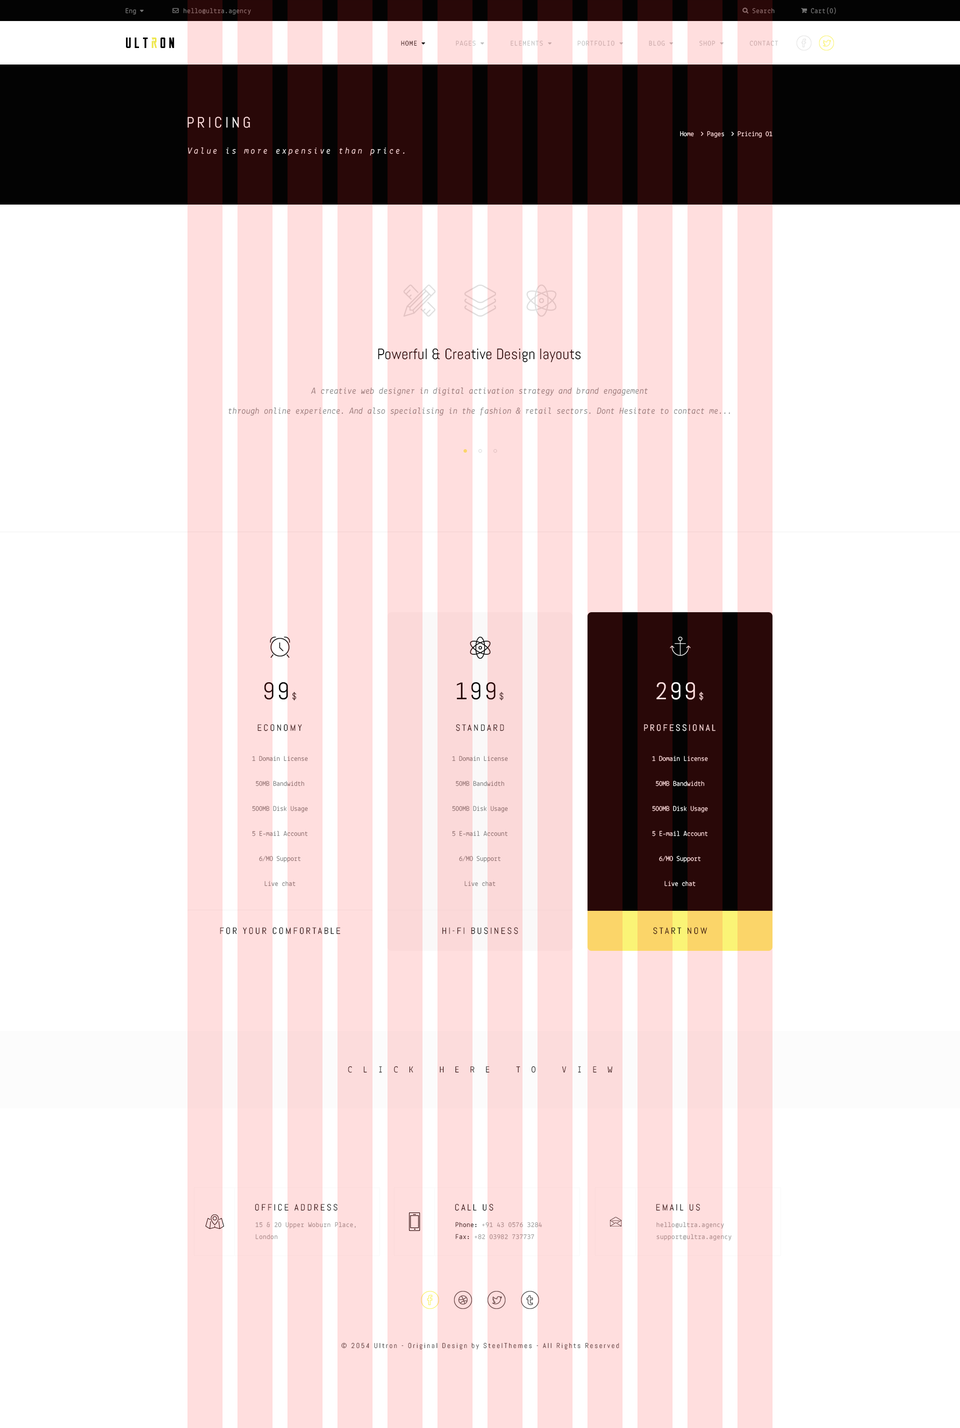
<style>
.page{position:relative;width:960px;height:1428px;background:#ffffff}
.page>*{position:absolute;margin:0}
.t1{font:7px "Lekton-Regular";letter-spacing:0.04em;color:#787878}
.t2{font:7px "Lekton-Regular";letter-spacing:0.1em;color:#bfbfbf;text-transform:uppercase}
.t3{font:7px "Lekton-Regular";letter-spacing:0.1em;color:#030303;text-transform:uppercase}
.t4{font:15px "Abel-Regular";letter-spacing:0.2em;color:#ffdede;text-transform:uppercase}
.t5{font:9px "Lekton-Italic";letter-spacing:0.2em;color:#ffdede}
.t6{font:15px "Abel-Regular"}
.t7{font:9px/20px "Lekton-Italic";color:#8c6b6b}
.t8{font:24px "Abel-Regular";letter-spacing:0.1em}
.t9{font:9px "Abel-Regular";letter-spacing:0.1em}
.t10{font:9px "Abel-Regular";letter-spacing:0.2em;text-transform:uppercase}
.t11{font:9px "Abel-Regular";letter-spacing:0.2em;color:#290808;text-transform:uppercase}
.t12{font:9px "Abel-Regular";letter-spacing:0.2em;color:#ffdede;text-transform:uppercase}
.t13{font:7px/25px "Lekton-Regular";color:#8c6b6b}
.t14{font:7px/25px "Lekton-Regular";color:#ffdede}
.t15{font:9px "Lekton-Regular";letter-spacing:1.2em;color:#290808;text-transform:uppercase}
.t16{font:7px/12px "Lekton-Regular";letter-spacing:0.04em;color:#969595}
.t17{font:7px/12px "Lekton-Regular";letter-spacing:0.04em;color:#030303}
.t18{font:7px "Abel-Regular";letter-spacing:0.2em;color:#694848}
</style>
<div class="page">
<p class="t1" style="left:126px;top:8px;width:10px;height:7px">Eng</p>
<p class="t1" style="left:184px;top:8px;width:67px;height:7px">hello@ultra.agency</p>
<p class="t1" style="left:753px;top:8px;width:22px;height:6px">Search</p>
<p class="t1" style="left:811px;top:7px;width:25px;height:8px">Cart(0)</p>
<p class="t2" style="left:401px;top:41px;width:377px;height:5px"><span class="t3">Home         </span>Pages        Elements        Portfolio        Blog        Shop        Contact</p>
<p class="t4" style="left:188px;top:117px;width:62px;height:11px">pricing</p>
<p class="t5" style="left:188px;top:147px;width:217px;height:9px">Value is more expensive than price.</p>
<p class="t6" style="left:378px;top:348px;width:203px;height:15px">Powerful &amp; Creative Design layouts</p>
<p class="t7" style="left:229px;top:387px;width:501px;height:29px;text-align:center">A creative web designer in digital activation strategy and brand engagement<br>through online experience. And also specialising in the fashion &amp; retail sectors. Dont Hesitate to contact me...</p>
<p class="t8" style="left:264px;top:682px;width:33px;height:19px">99<span class="t9">$</span></p>
<p class="t8" style="left:457px;top:682px;width:47px;height:19px">199<span class="t9">$</span></p>
<p class="t8" style="left:657px;top:682px;width:47px;height:19px">299<span class="t9">$</span></p>
<p class="t10" style="left:258px;top:724px;width:44px;height:7px">economy</p>
<p class="t11" style="left:456px;top:724px;width:48px;height:7px">Standard</p>
<p class="t12" style="left:644px;top:724px;width:72px;height:7px">Professional</p>
<p class="t13" style="left:252px;top:756px;width:56px;height:130px;text-align:center">1 Domain License<br>50MB Bandwidth<br>500MB Disk Usage<br>5 E-mail Account<br>6/MO Support<br>Live chat</p>
<p class="t13" style="left:452px;top:756px;width:56px;height:130px;text-align:center">1 Domain License<br>50MB Bandwidth<br>500MB Disk Usage<br>5 E-mail Account<br>6/MO Support<br>Live chat</p>
<p class="t14" style="left:652px;top:756px;width:56px;height:130px;text-align:center">1 Domain License<br>50MB Bandwidth<br>500MB Disk Usage<br>5 E-mail Account<br>6/MO Support<br>Live chat</p>
<p class="t10" style="left:220px;top:927px;width:121px;height:7px">for your comfortable</p>
<p class="t11" style="left:442px;top:927px;width:76px;height:7px">Hi-fi business</p>
<p class="t11" style="left:653px;top:927px;width:54px;height:7px">start Now</p>
<p class="t15" style="left:348px;top:1066px;width:265px;height:7px">Click here to view</p>
<p class="t10" style="left:255px;top:1204px;width:83px;height:7px">Office Address</p>
<p class="t10" style="left:455px;top:1204px;width:39px;height:7px">Call us</p>
<p class="t10" style="left:656px;top:1204px;width:44px;height:7px">Email us</p>
<p class="t16" style="left:256px;top:1222px;width:100px;height:17px">15 &amp; 20 Upper Woburn Place,<br>London</p>
<p class="t16" style="left:456px;top:1222px;width:86px;height:17px"><span class="t17">Phone:</span> +91 43 0576 3284<br><span class="t17">Fax:</span> +82 03982 737737</p>
<p class="t16" style="left:657px;top:1222px;width:75px;height:18px">hello@ultra.agency<br>support@ultra.agency</p>
<p class="t18" style="left:341px;top:1342px;width:278px;height:7px">© 2054 Ultron - Original Design by SteelThemes - All Rights Reserved</p>
</div>
